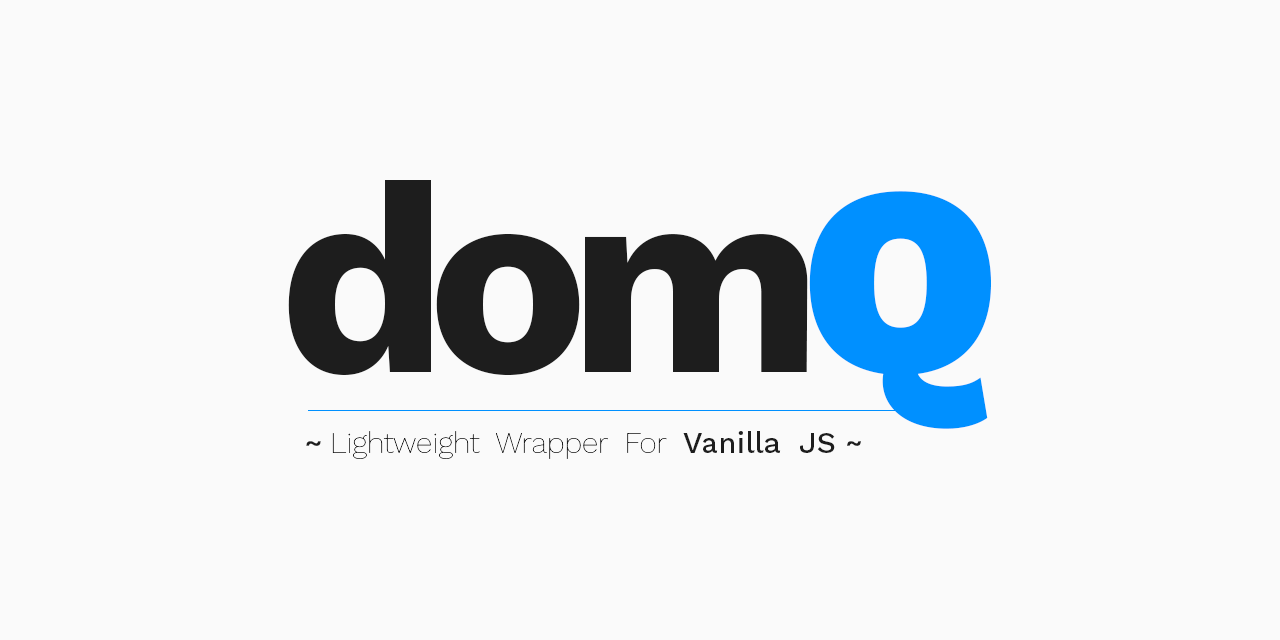
<style>
.page{position:relative;width:1280px;height:640px;background:#fafafa}
.page>*{position:absolute;margin:0}
.t1{font:270px "WorkSans-Bold";letter-spacing:-0.075em;color:#1d1d1d}
.t2{font:270px "WorkSans-Black";letter-spacing:-0.075em;color:#0090ff}
.t3{font:30px "WorkSans-Thin";color:#1d1d1d}
.t4{font:30px "WorkSans-Medium";color:#1d1d1d}
</style>
<div class="page">
<p class="t1" style="left:288px;top:180px;width:704px;height:249px">dom<span class="t2">Q</span></p>
<p class="t3" style="left:306px;top:431px;width:555px;height:28px"><span class="t4">~</span> Lightweight  Wrapper  For  <span class="t4">Vanilla  JS ~</span></p>
</div>
